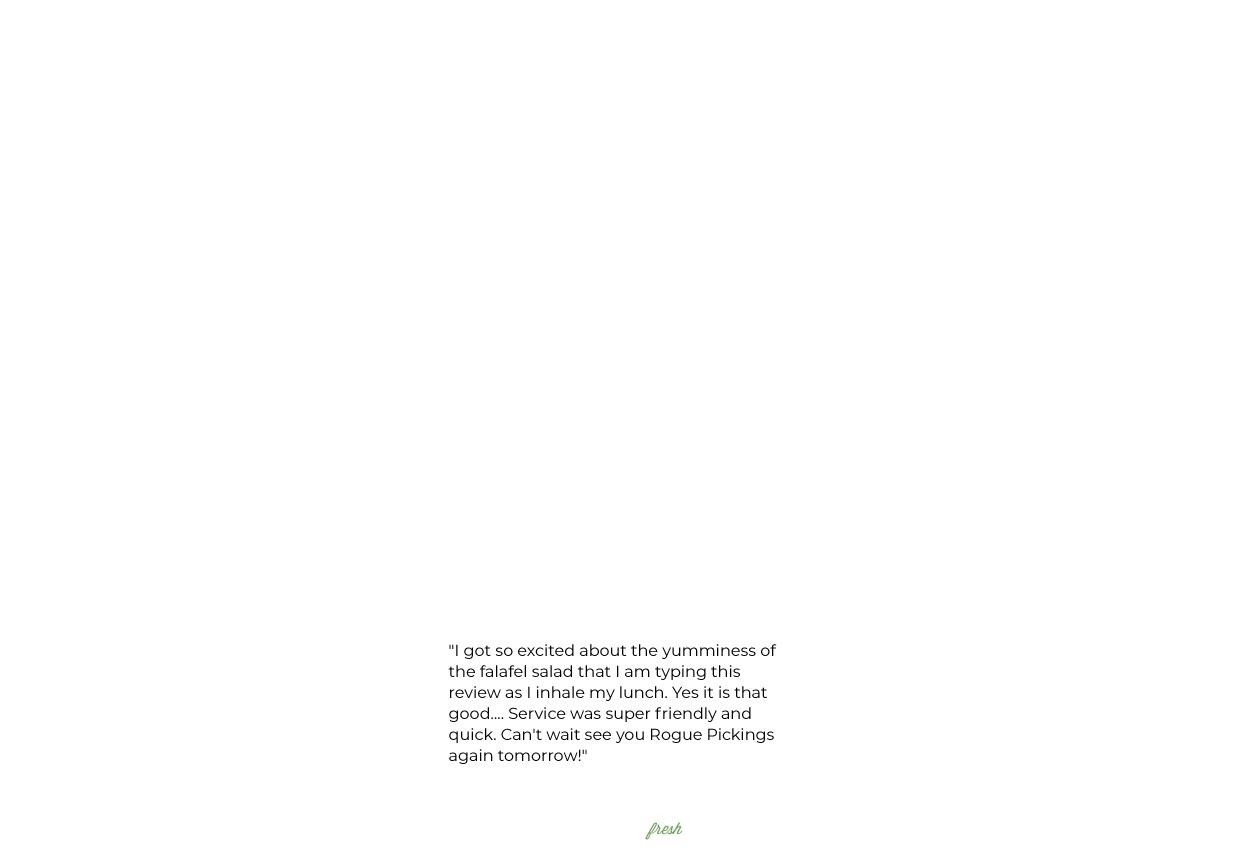
<style>
.page{position:relative;width:1240px;height:868px;background:#ffffff}
.page>*{position:absolute;margin:0}
.t1{font:16px/21px "Montserrat-Regular";color:#000000}
.t2{font:16px "Wisdom-Script";color:#77a466}
</style>
<div class="page">
<p class="t1" style="left:448px;top:644px;width:329px;height:120px">"I got so excited about the yumminess of the falafel salad that I am typing this review as I inhale my lunch. Yes it is that good.... Service was super friendly and quick. Can't wait see you Rogue Pickings again tomorrow!"</p>
<p class="t2" style="left:645px;top:822px;width:38px;height:18px">fresh</p>
</div>
